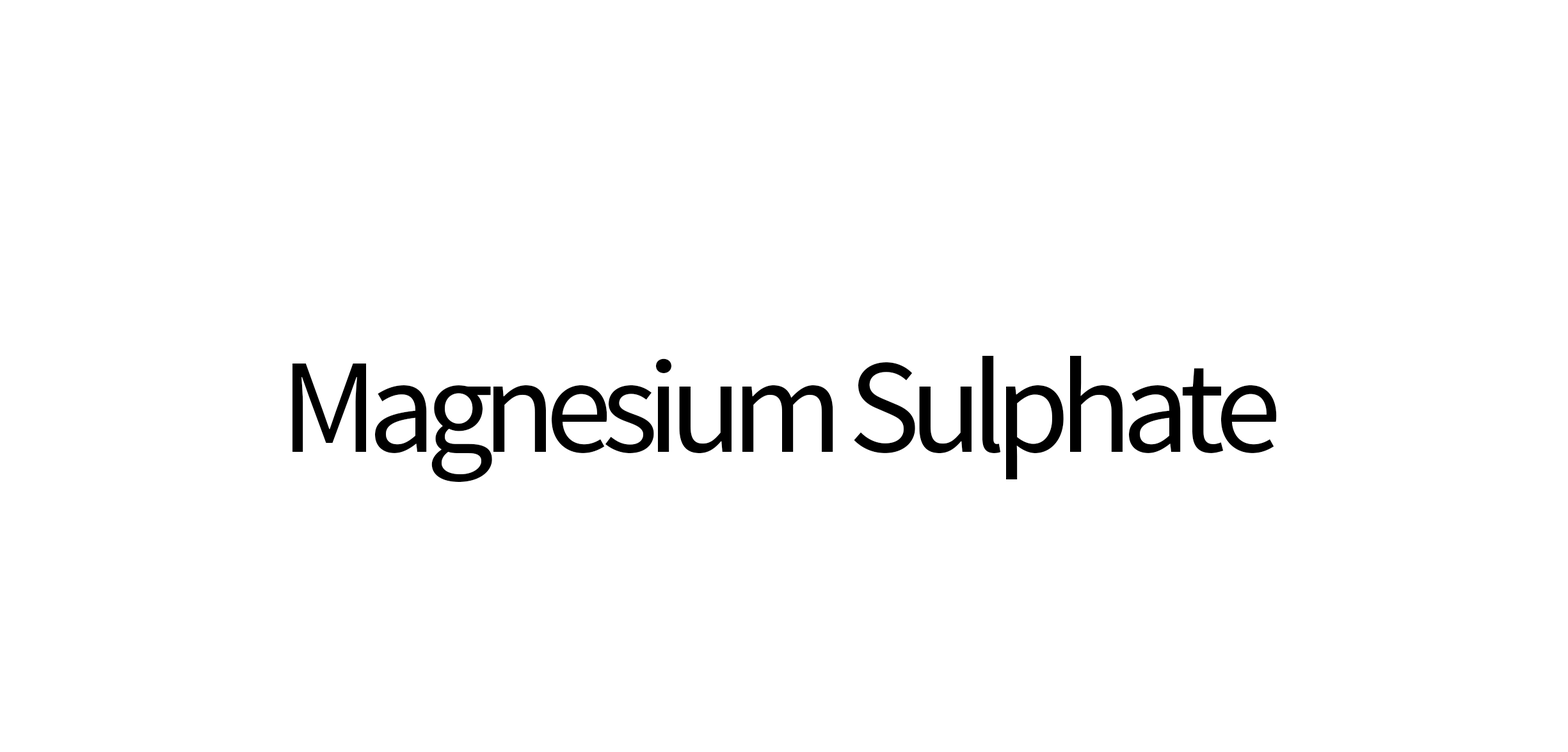
<style>
.page{position:relative;width:1568px;height:752px;background:#ffffff}
.page>*{position:absolute;margin:0}
.t1{font:134.5px "SourceSansPro-Regular";letter-spacing:-0.08em;color:#000000}
</style>
<div class="page">
<p class="t1" style="left:292px;top:356px;width:985px;height:126px">Magnesium Sulphate</p>
</div>
